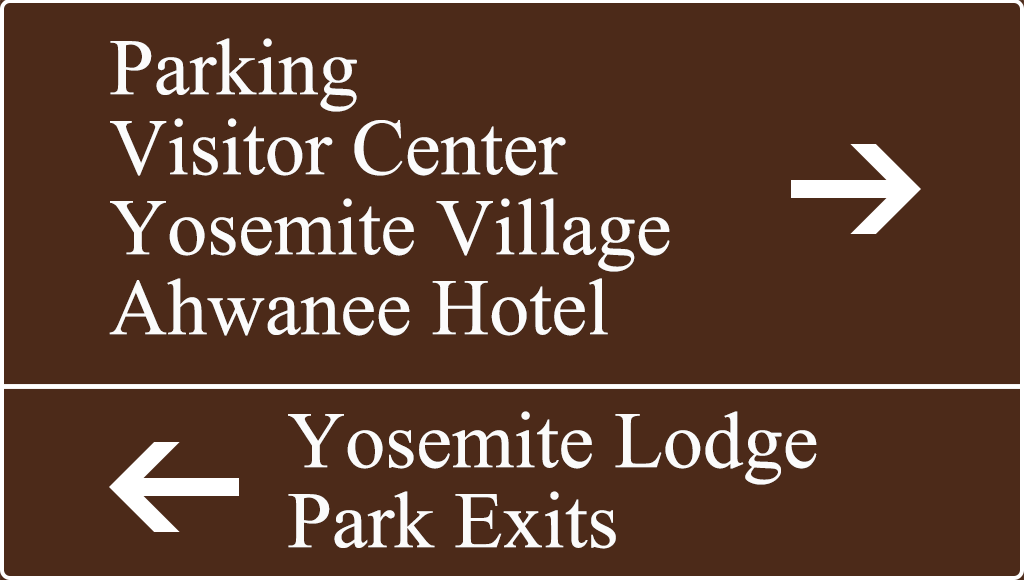
<style>
.page{position:relative;width:1024px;height:580px;background:#4c2a19}
.page>*{position:absolute;margin:0}
.t1{font:80px/80px "IskoolaPota";color:#fbfbfb}
</style>
<div class="page">
<p class="t1" style="left:109px;top:38px;width:561px;height:298px">Parking<br>Visitor Center<br>Yosemite Village<br>Ahwanee Hotel</p>
<p class="t1" style="left:288px;top:411px;width:529px;height:138px">Yosemite Lodge<br>Park Exits</p>
</div>
